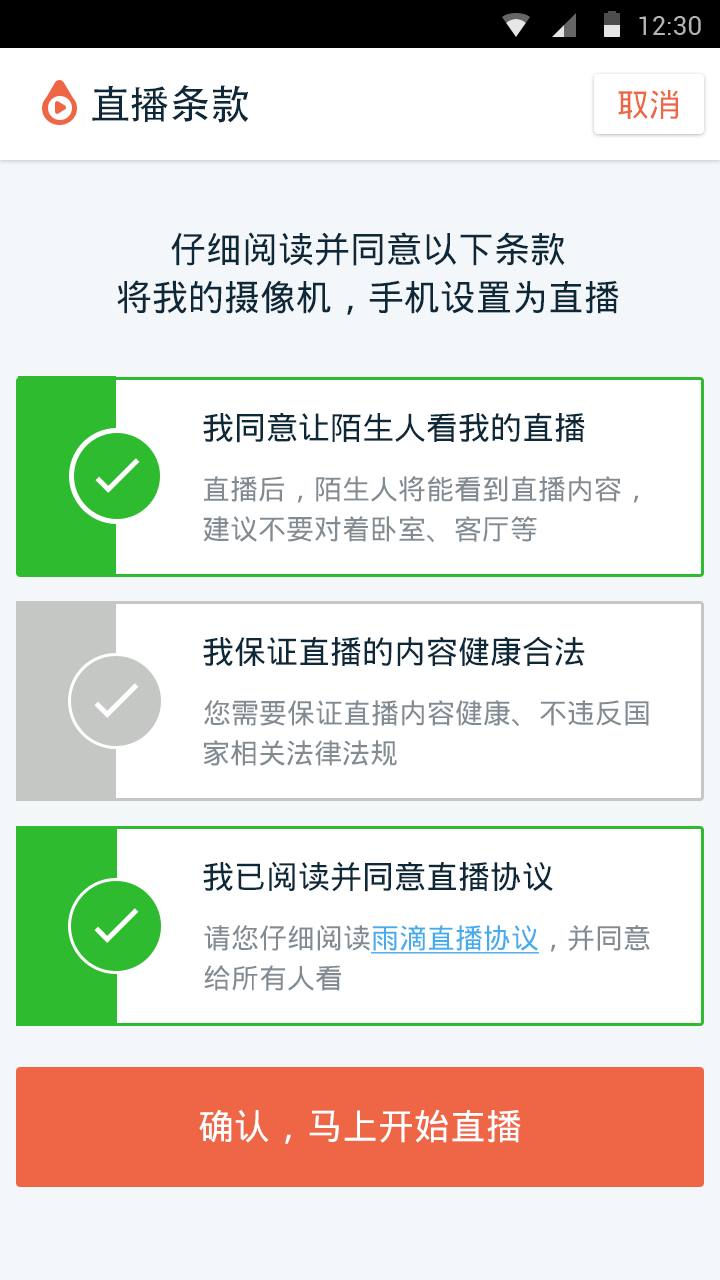
<style>
.page{position:relative;width:720px;height:1280px;background:#ffffff}
.page>*{position:absolute;margin:0}
.t1{font:40px "AdobeHeitiStd-Regular";color:#0c2839}
.t2{font:32px "DroidSansFallback";color:#ee6646}
.t3{font:36px/48px "DroidSansFallback";color:#0c2839}
.t4{font:32px "DroidSansFallback";color:#0c2839}
.t5{font:28px "DroidSansFallback";color:#828b91}
.t6{font:28px "DroidSansFallback";color:#45aced;text-decoration:underline}
.t7{font:36px "DroidSansFallback";color:#ffffff}
</style>
<div class="page">
<p class="t1" style="left:92px;top:85px;width:157px;height:38px">直播条款</p>
<p class="t2" style="left:618px;top:90px;width:60px;height:29px">取消</p>
<p class="t3" style="left:117px;top:232px;width:502px;height:83px;text-align:center">仔细阅读并同意以下条款<br>将我的摄像机，手机设置为直播</p>
<p class="t4" style="left:203px;top:412px;width:382px;height:31px">我同意让陌生人看我的直播</p>
<p class="t5" style="left:204px;top:476px;width:435px;height:27px">直播后，陌生人将能看到直播内容，</p>
<p class="t5" style="left:203px;top:516px;width:334px;height:27px">建议不要对着卧室、客厅等</p>
<p class="t4" style="left:203px;top:636px;width:382px;height:30px">我保证直播的内容健康合法</p>
<p class="t5" style="left:204px;top:700px;width:445px;height:27px">您需要保证直播内容健康、不违反国</p>
<p class="t5" style="left:203px;top:740px;width:194px;height:26px">家相关法律法规</p>
<p class="t4" style="left:203px;top:861px;width:350px;height:31px">我已阅读并同意直播协议</p>
<p class="t5" style="left:204px;top:925px;width:446px;height:29px">请您仔细阅读<span class="t6">雨滴直播协议</span>，并同意</p>
<p class="t5" style="left:204px;top:965px;width:137px;height:26px">给所有人看</p>
<p class="t7" style="left:199px;top:1109px;width:322px;height:35px">确认，马上开始直播</p>
</div>
